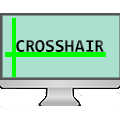
<style>
.page{position:relative;width:120px;height:120px;background:#a9e0ce}
.page>*{position:absolute;margin:0}
.t1{font:18px "Consolas-Bold";letter-spacing:0.025em;color:#000000}
</style>
<div class="page">
<p class="t1" style="left:16px;top:40px;width:88px;height:12px">CROSSHAIR</p>
</div>
